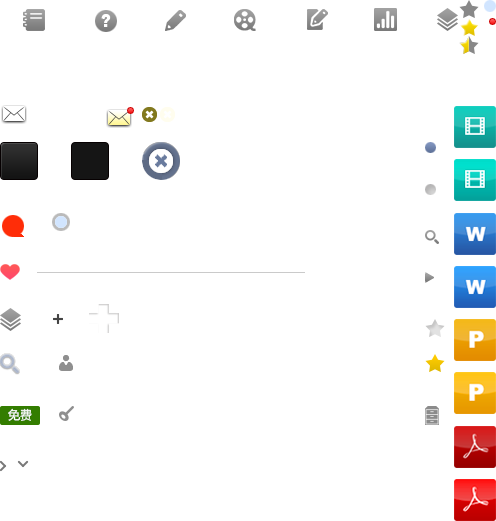
<style>
.page{position:relative;width:496px;height:521px;background:#ffffff}
.page>*{position:absolute;margin:0}
.t1{font:12px "MicrosoftYaHei";color:#ffffff}
</style>
<div class="page">
<p class="t1" style="left:8px;top:408px;width:24px;height:13px">免费</p>
</div>
